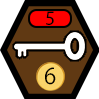
<style>
.page{position:relative;width:99px;height:99px;background:#ffffff}
.page>*{position:absolute;margin:0}
.t1{font:17.7px "KozGoPr6N-Regular";color:#000000}
.t2{font:21.9px "KozGoPr6N-Regular";color:#000000}
</style>
<div class="page">
<p class="t1" style="left:46px;top:11px;width:8px;height:14px">5</p>
<p class="t2" style="left:45px;top:67px;width:11px;height:18px">6</p>
</div>
